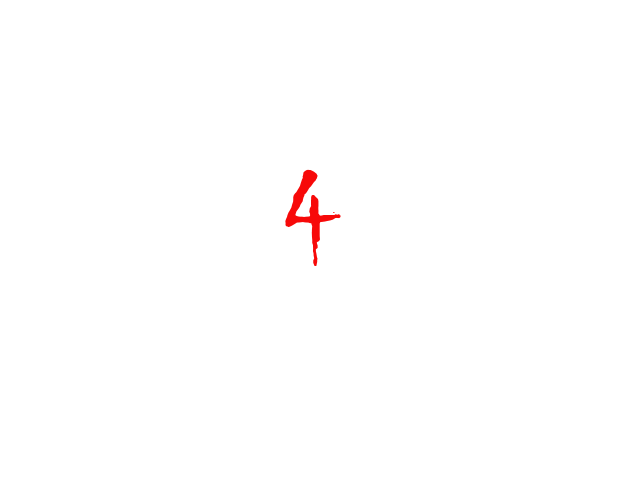
<style>
.page{position:relative;width:630px;height:500px;background:#ffffff}
.page>*{position:absolute;margin:0}
.t1{font:138.9px "Chiller-Regular";color:#f80909}
</style>
<div class="page">
<p class="t1" style="left:285px;top:169px;width:56px;height:97px">4</p>
</div>
